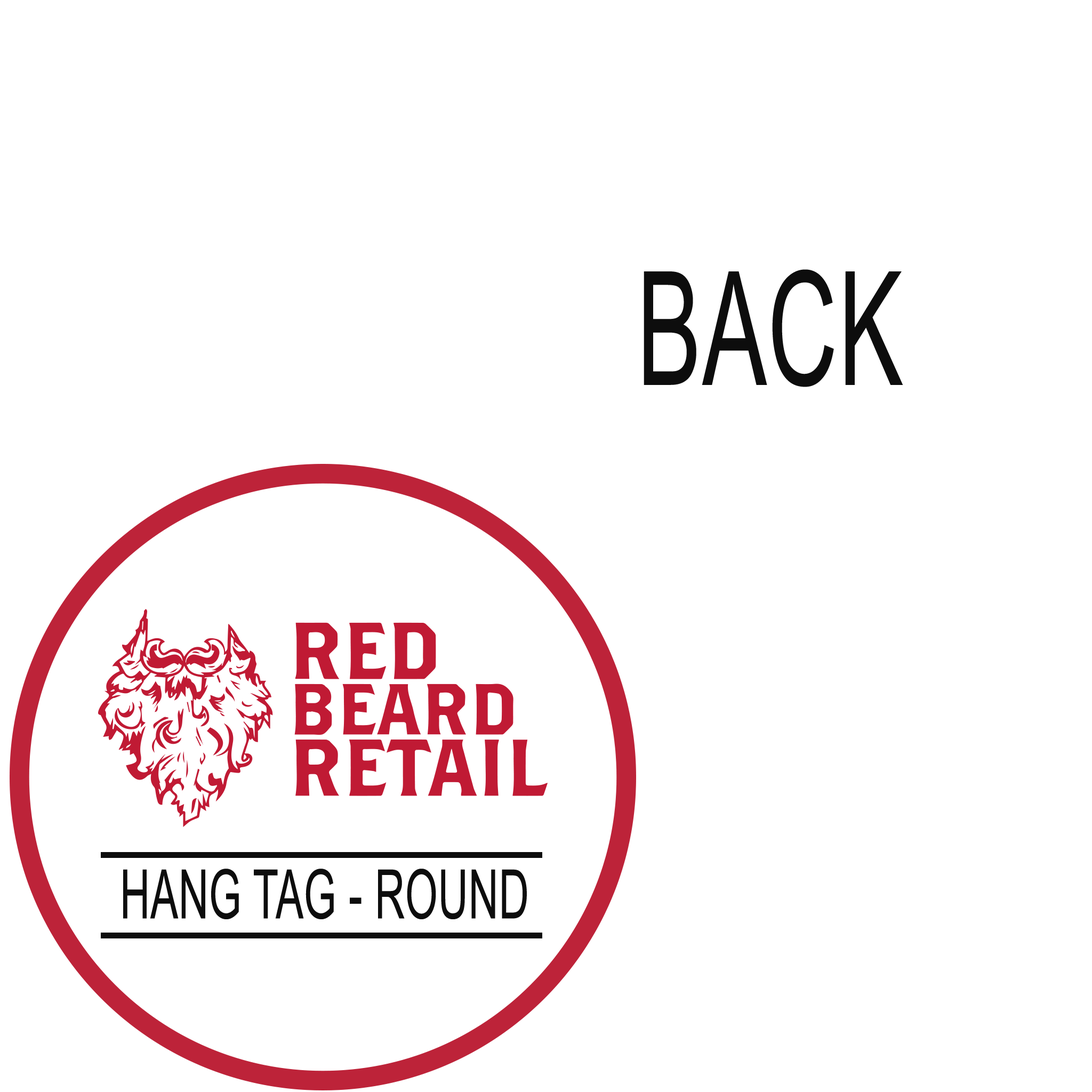
<style>
.page{position:relative;width:1092px;height:1092px;background:#ffffff}
.page>*{position:absolute;margin:0}
.t1{font:158.4px "ArialMT";letter-spacing:0.01em;color:#0d0d0d;text-transform:uppercase;scale:0.61 1}
.t2{font:68.2px "ArialMT";letter-spacing:0.01em;color:#0d0d0d;text-transform:uppercase;scale:0.61 1}
</style>
<div class="page">
<p class="t1" style="left:644px;top:269px;width:259px;height:118px">Back</p>
<p class="t2" style="left:123px;top:869px;width:404px;height:50px">Hang Tag - Round</p>
</div>
